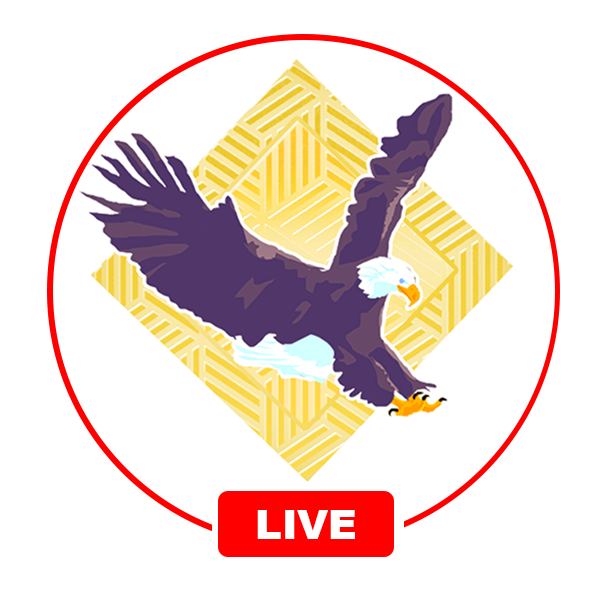
<style>
.page{position:relative;width:600px;height:600px;background:#ffffff}
.page>*{position:absolute;margin:0}
.t1{font:40px "Arial-Black";color:#ffffff}
</style>
<div class="page">
<p class="t1" style="left:257px;top:510px;width:98px;height:29px">LIVE</p>
</div>
